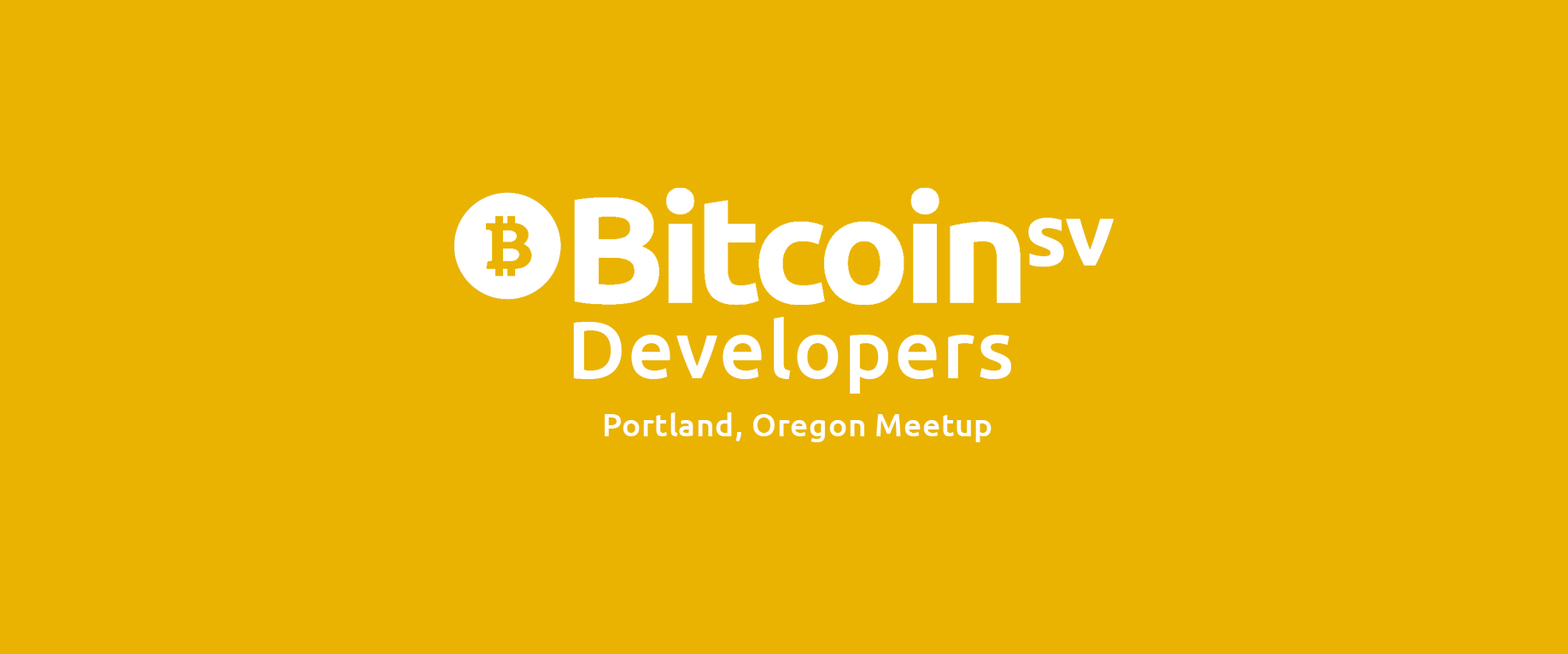
<style>
.page{position:relative;width:1568px;height:654px;background:#eab301}
.page>*{position:absolute;margin:0}
.t1{font:81.5px "Ubuntu-Medium";letter-spacing:0.02em;color:#ffffff}
.t2{font:31.6px "Ubuntu-Medium";letter-spacing:0.02em;color:#ffffff}
</style>
<div class="page">
<p class="t1" style="left:573px;top:317px;width:438px;height:77px">Developers</p>
<p class="t2" style="left:605px;top:412px;width:387px;height:30px">Portland, Oregon Meetup</p>
</div>
